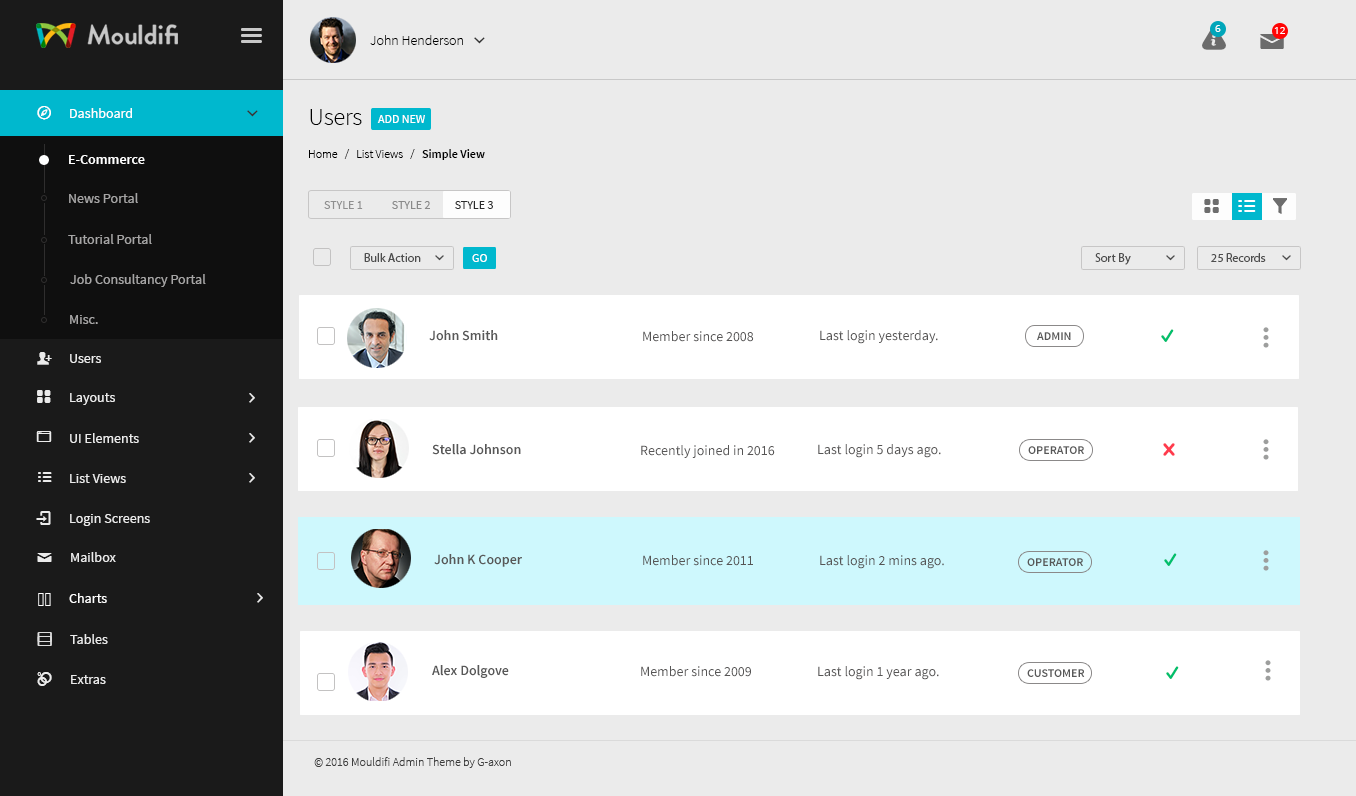
<style>
.page{position:relative;width:1356px;height:796px;background:#ebebeb}
.page>*{position:absolute;margin:0}
.t1{font:10px "OpenSans";color:#ffffff}
.t2{font:14px "SourceSansPro-Light";color:#000000}
.t3{font:14px "SourceSansPro-Regular";color:#ffffff}
.t4{font:14px "SourceSansPro-Regular";color:#ffffff;font-variant:small-caps}
.t5{font:24px "SourceSansPro-Light";color:#000000}
.t6{font:12px "SourceSansPro-Regular";color:#ffffff;text-transform:uppercase}
.t7{font:12px "SourceSansPro-Light";color:#000000}
.t8{font:12px "SourceSansPro-Semibold";color:#000000}
.t9{font:14px "SourceSansPro-Semibold";color:#ffffff}
.t10{font:14px "SourceSansPro-Regular";color:#a6a5a5}
.t11{font:12px "SourceSansPro-Regular";color:#8f8f8f;text-transform:uppercase}
.t12{font:12px "SourceSansPro-Regular";color:#8a8a8a;text-transform:uppercase}
.t13{font:12px "SourceSansPro-Regular";color:#2b2b2b;text-transform:uppercase}
.t14{font:13.7px "SourceSansPro-Regular";color:#a6a5a5}
.t15{font:12px "MyriadPro-Regular";color:#4e4e4e}
.t16{font:14px "SourceSansPro-Semibold";color:#585858}
.t17{font:14px "SourceSansPro-Regular";color:#565555}
.t18{font:12px "SourceSansPro-Semibold";color:#585858;text-transform:uppercase}
.t19{font:14px "SourceSansPro-Regular";color:#ebebeb}
.t20{font:13.7px "SourceSansPro-Regular";color:#ebebeb}
.t21{font:12px "SourceSansPro-Light";color:#3e3e3e}
</style>
<div class="page">
<p class="t1" style="left:1215px;top:25px;width:6px;height:7px">6</p>
<p class="t1" style="left:1274px;top:27px;width:11px;height:7px">12</p>
<p class="t2" style="left:370px;top:35px;width:93px;height:10px">John Henderson</p>
<p class="t3" style="left:70px;top:108px;width:62px;height:10px"><span class="t4">D</span>ashboard</p>
<p class="t5" style="left:310px;top:109px;width:52px;height:16px">Users</p>
<p class="t6" style="left:377px;top:115px;width:48px;height:8px">add new</p>
<p class="t7" style="left:309px;top:149px;width:176px;height:11px">Home   /   List Views   /  <span class="t8"> Simple View</span></p>
<p class="t9" style="left:69px;top:155px;width:76px;height:9px">E-Commerce</p>
<p class="t10" style="left:69px;top:193px;width:69px;height:10px">News Portal</p>
<p class="t11" style="left:324px;top:201px;width:169px;height:8px">Style 1            <span class="t12">Style 2          </span><span class="t13">Style 3</span></p>
<p class="t14" style="left:68px;top:234px;width:84px;height:10px">Tutorial Portal</p>
<p class="t15" style="left:364px;top:253px;width:57px;height:9px">Bulk Action</p>
<p class="t6" style="left:472px;top:254px;width:15px;height:8px">go</p>
<p class="t15" style="left:1095px;top:253px;width:36px;height:12px">Sort By</p>
<p class="t15" style="left:1211px;top:253px;width:55px;height:9px">25 Records</p>
<p class="t14" style="left:70px;top:274px;width:136px;height:13px">Job Consultancy Portal</p>
<p class="t14" style="left:70px;top:315px;width:28px;height:9px">Misc.</p>
<p class="t16" style="left:429px;top:330px;width:69px;height:11px">John Smith</p>
<p class="t17" style="left:643px;top:331px;width:111px;height:11px">Member since 2008</p>
<p class="t17" style="left:820px;top:330px;width:118px;height:14px">Last login yesterday.</p>
<p class="t18" style="left:1037px;top:332px;width:34px;height:8px">admin</p>
<p class="t19" style="left:70px;top:354px;width:31px;height:9px">Users</p>
<p class="t19" style="left:70px;top:393px;width:45px;height:12px">Layouts</p>
<p class="t19" style="left:70px;top:433px;width:69px;height:10px">UI Elements</p>
<p class="t16" style="left:432px;top:444px;width:89px;height:11px">Stella Johnson</p>
<p class="t17" style="left:641px;top:445px;width:134px;height:13px">Recently joined in 2016</p>
<p class="t17" style="left:818px;top:444px;width:123px;height:14px">Last login 5 days ago.</p>
<p class="t18" style="left:1028px;top:446px;width:56px;height:8px">operator</p>
<p class="t19" style="left:70px;top:474px;width:56px;height:9px">List Views</p>
<p class="t19" style="left:70px;top:514px;width:80px;height:12px">Login Screens</p>
<p class="t19" style="left:71px;top:552px;width:45px;height:10px">Mailbox</p>
<p class="t16" style="left:434px;top:554px;width:88px;height:13px">John K Cooper</p>
<p class="t17" style="left:643px;top:555px;width:110px;height:11px">Member since 2011</p>
<p class="t17" style="left:820px;top:555px;width:124px;height:14px">Last login 2 mins ago.</p>
<p class="t18" style="left:1027px;top:558px;width:56px;height:8px">operator</p>
<p class="t3" style="left:69px;top:593px;width:38px;height:10px">Charts</p>
<p class="t20" style="left:70px;top:634px;width:38px;height:10px">Tables</p>
<p class="t16" style="left:432px;top:665px;width:77px;height:13px">Alex Dolgove</p>
<p class="t20" style="left:71px;top:675px;width:35px;height:9px">Extras</p>
<p class="t17" style="left:641px;top:666px;width:110px;height:11px">Member since 2009</p>
<p class="t17" style="left:818px;top:666px;width:121px;height:14px">Last login 1 year ago.</p>
<p class="t18" style="left:1027px;top:669px;width:58px;height:8px">customer</p>
<p class="t21" style="left:314px;top:757px;width:197px;height:11px">© 2016 Mouldifi Admin Theme by G-axon</p>
</div>
